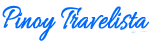
<style>
.page{position:relative;width:152px;height:44px;background:#ffffff}
.page>*{position:absolute;margin:0}
.t1{font:35px "Allura-Regular";color:#026afb;font-weight:bold;scale:0.73 1}
</style>
<div class="page">
<p class="t1" style="left:2px;top:5px;width:147px;height:36px">Pinoy Travelista</p>
</div>
